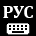
<style>
.page{position:relative;width:36px;height:36px;background:#000000}
.page>*{position:absolute;margin:0}
.t1{font:18px "Cambria-Bold";color:#ffffff}
</style>
<div class="page">
<p class="t1" style="left:3px;top:6px;width:30px;height:12px">РУС</p>
</div>
